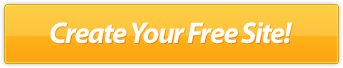
<style>
.page{position:relative;width:343px;height:68px}
.page>*{position:absolute;margin:0}
.t1{font:30px "MyriadPro-BoldIt";letter-spacing:-0.05em;color:#ffffff}
</style>
<div class="page">
<p class="t1" style="left:50px;top:22px;width:243px;height:22px">Create Your Free Site!</p>
</div>
